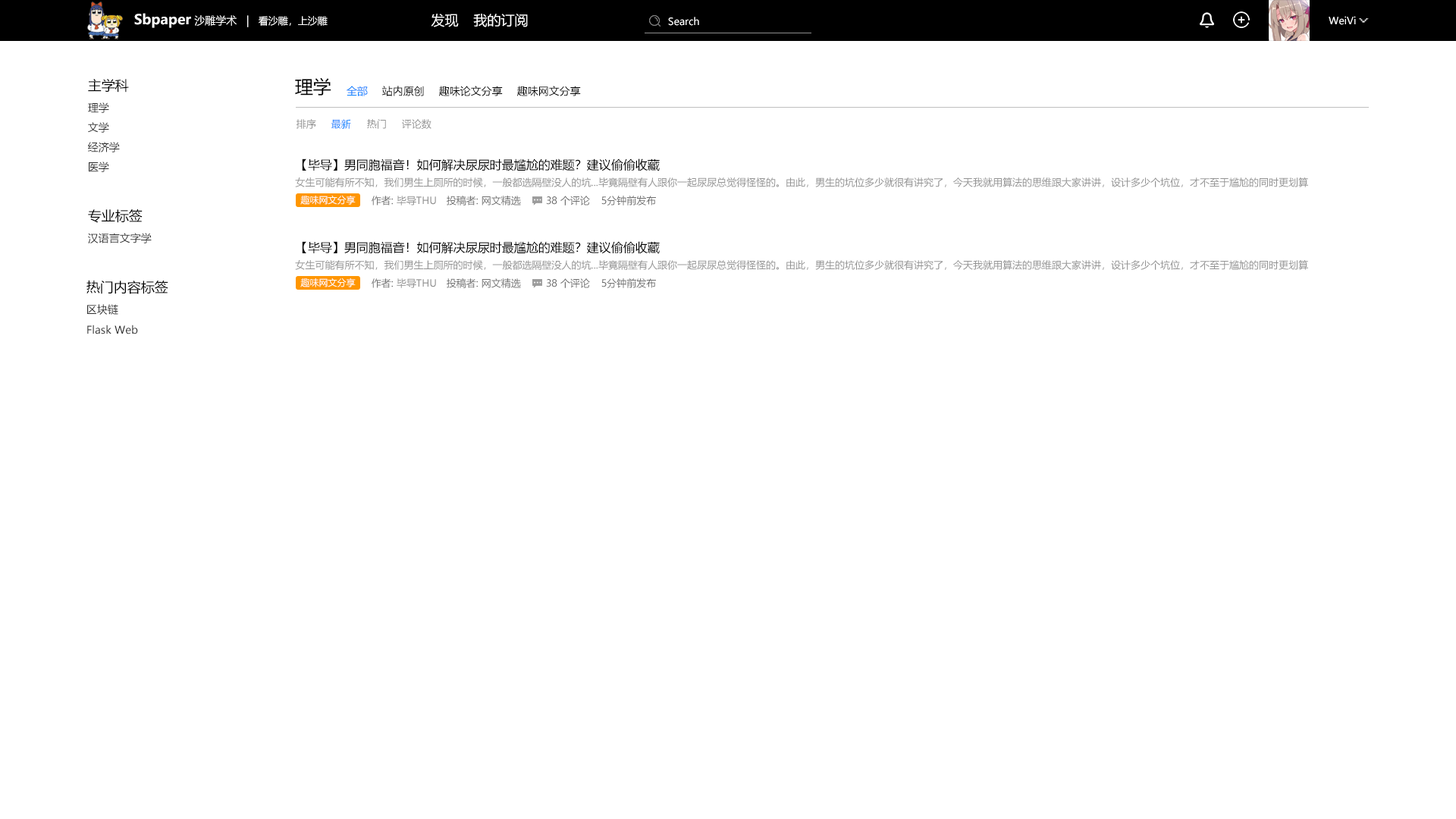
<style>
.page{position:relative;width:1456px;height:819px;background:#ffffff}
.page>*{position:absolute;margin:0}
.t1{font:10.6px "MicrosoftYaHeiUI";color:#ffffff}
.t2{font:13.6px "MicrosoftYaHeiUI-Bold";color:#ffffff}
.t3{font:9.9px "MicrosoftYaHeiUI";color:#ffffff}
.t4{font:13.6px "MicrosoftYaHeiUI";color:#ffffff}
.t5{font:18.2px "MicrosoftYaHeiUI";color:#000000}
.t6{font:13.6px "MicrosoftYaHeiUI";color:#000000}
.t7{font:10.6px "MicrosoftYaHeiUI";color:#007eff}
.t8{font:10.6px "MicrosoftYaHeiUI";color:#000000}
.t9{font:10.6px "MicrosoftYaHeiUI";color:#303030}
.t10{font:9.9px "MicrosoftYaHeiUI";color:#939393}
.t11{font:9.9px "MicrosoftYaHeiUI";color:#007eff}
.t12{font:12.1px "MicrosoftYaHeiUI";color:#000000}
.t13{font:9.1px "MicrosoftYaHeiUI";color:#ffffff}
.t14{font:9.9px "MicrosoftYaHeiUI";color:#6f6f6f}
</style>
<div class="page">
<p class="t1" style="left:134px;top:13px;width:194px;height:15px"><span class="t2">Sbpaper </span>沙雕学术   |   <span class="t3">看沙雕，上沙雕</span></p>
<p class="t4" style="left:431px;top:14px;width:28px;height:13px">发现</p>
<p class="t4" style="left:473px;top:14px;width:55px;height:13px">我的订阅</p>
<p class="t3" style="left:668px;top:17px;width:31px;height:9px">Search</p>
<p class="t3" style="left:1329px;top:16px;width:27px;height:9px">WeiVi</p>
<p class="t5" style="left:295px;top:77px;width:36px;height:19px">理学</p>
<p class="t6" style="left:88px;top:79px;width:41px;height:14px">主学科</p>
<p class="t7" style="left:347px;top:86px;width:21px;height:10px">全部</p>
<p class="t8" style="left:381px;top:86px;width:43px;height:10px">站内原创</p>
<p class="t8" style="left:439px;top:86px;width:64px;height:10px">趣味论文分享</p>
<p class="t8" style="left:517px;top:86px;width:64px;height:10px">趣味网文分享</p>
<p class="t9" style="left:88px;top:102px;width:21px;height:11px">理学</p>
<p class="t9" style="left:88px;top:122px;width:21px;height:11px">文学</p>
<p class="t10" style="left:297px;top:119px;width:19px;height:10px">排序</p>
<p class="t11" style="left:331px;top:119px;width:20px;height:10px">最新</p>
<p class="t10" style="left:367px;top:119px;width:19px;height:10px">热门</p>
<p class="t10" style="left:402px;top:119px;width:29px;height:10px">评论数</p>
<p class="t9" style="left:88px;top:142px;width:32px;height:10px">经济学</p>
<p class="t9" style="left:89px;top:162px;width:20px;height:10px">医学</p>
<p class="t12" style="left:302px;top:158px;width:358px;height:13px">【毕导】男同胞福音！如何解决尿尿时最尴尬的难题？建议偷偷收藏</p>
<p class="t10" style="left:295px;top:177px;width:1013px;height:10px">女生可能有所不知，我们男生上厕所的时候，一般都选隔壁没人的坑...毕竟隔壁有人跟你一起尿尿总觉得怪怪的。由此，男生的坑位多少就很有讲究了，今天我就用算法的思维跟大家讲讲，设计多少个坑位，才不至于尴尬的同时更划算</p>
<p class="t13" style="left:300px;top:195px;width:56px;height:10px">趣味网文分享</p>
<p class="t10" style="left:372px;top:196px;width:64px;height:10px"><span class="t14">作者: </span>毕导THU</p>
<p class="t14" style="left:447px;top:196px;width:74px;height:10px">投稿者: 网文精选</p>
<p class="t14" style="left:546px;top:196px;width:44px;height:10px">38 个评论</p>
<p class="t14" style="left:601px;top:196px;width:55px;height:10px">5分钟前发布</p>
<p class="t6" style="left:88px;top:209px;width:55px;height:14px">专业标签</p>
<p class="t9" style="left:88px;top:233px;width:64px;height:10px">汉语言文字学</p>
<p class="t12" style="left:302px;top:241px;width:358px;height:13px">【毕导】男同胞福音！如何解决尿尿时最尴尬的难题？建议偷偷收藏</p>
<p class="t10" style="left:295px;top:260px;width:1013px;height:10px">女生可能有所不知，我们男生上厕所的时候，一般都选隔壁没人的坑...毕竟隔壁有人跟你一起尿尿总觉得怪怪的。由此，男生的坑位多少就很有讲究了，今天我就用算法的思维跟大家讲讲，设计多少个坑位，才不至于尴尬的同时更划算</p>
<p class="t6" style="left:86px;top:280px;width:82px;height:14px">热门内容标签</p>
<p class="t13" style="left:300px;top:278px;width:56px;height:9px">趣味网文分享</p>
<p class="t10" style="left:372px;top:278px;width:64px;height:10px"><span class="t14">作者: </span>毕导THU</p>
<p class="t14" style="left:447px;top:278px;width:74px;height:10px">投稿者: 网文精选</p>
<p class="t14" style="left:546px;top:278px;width:44px;height:10px">38 个评论</p>
<p class="t14" style="left:601px;top:278px;width:55px;height:10px">5分钟前发布</p>
<p class="t9" style="left:87px;top:304px;width:31px;height:11px">区块链</p>
<p class="t9" style="left:87px;top:325px;width:51px;height:9px">Flask Web</p>
</div>
